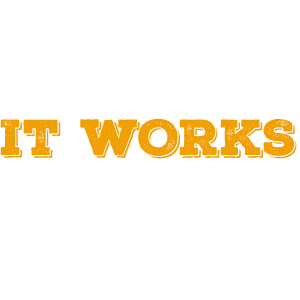
<style>
.page{position:relative;width:300px;height:300px;background:#ffffff}
.page>*{position:absolute;margin:0}
.t1{font:49px "NexaRustSlab-BlackShadow01";color:#f09f04}
</style>
<div class="page">
<p class="t1" style="left:0px;top:118px;width:297px;height:41px">IT WORKS</p>
</div>
